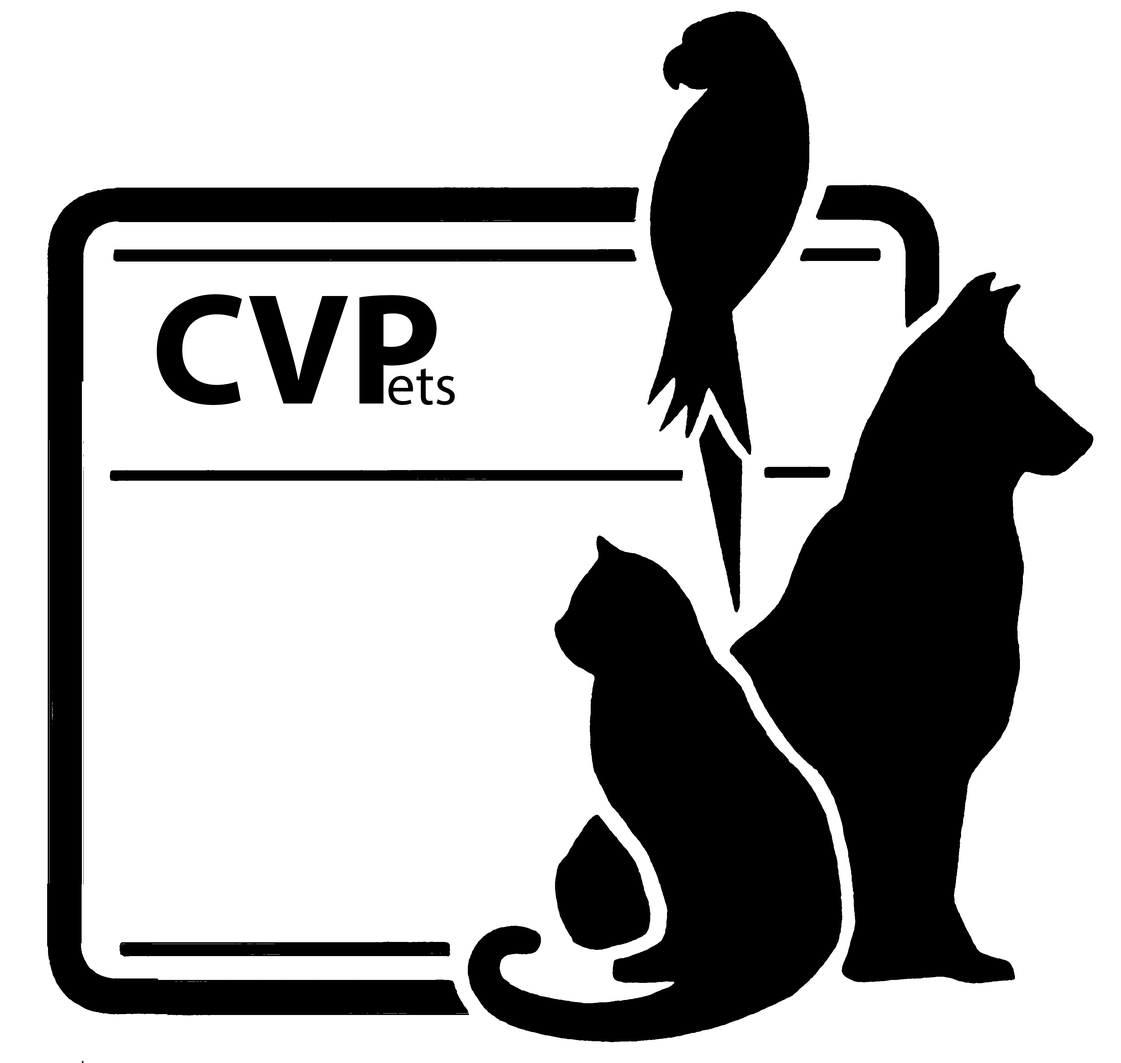
<style>
.page{position:relative;width:1121px;height:1063px;background:#ffffff}
.page>*{position:absolute;margin:0}
.t1{font:159.6px "MyriadPro-Bold";color:#000000}
.t2{font:57.7px "MyriadPro-Regular";color:#000000}
</style>
<div class="page">
<p class="t1" style="left:157px;top:294px;width:280px;height:111px">CVP</p>
<p class="t2" style="left:388px;top:368px;width:67px;height:37px">ets</p>
</div>
